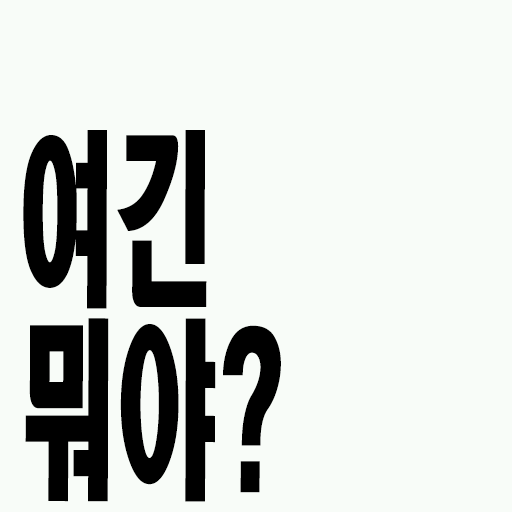
<style>
.page{position:relative;width:512px;height:512px;background:#f8fcf8}
.page>*{position:absolute;margin:0}
.t1{font:190px/160px "HeadlineR-HM";color:#000000;scale:0.53 1}
.t2{font:186.2px/190px "HeadlineR-HM";color:#000000;scale:0.53 1}
</style>
<div class="page">
<p class="t1" style="left:23px;top:130px;width:258px;height:372px"><span class="t2">여긴<br></span>뭐야?</p>
</div>
